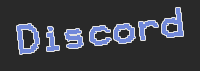
<style>
.page{position:relative;width:200px;height:71px;background:#292929}
.page>*{position:absolute;margin:0}
.t1{font:33.3px "Terminal";color:#7289da}
</style>
<div class="page">
<p class="t1" style="left:17px;top:8px;width:166px;height:46px;rotate:-6deg">Discord</p>
</div>
